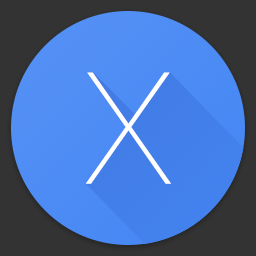
<style>
.page{position:relative;width:256px;height:256px;background:#333333}
.page>*{position:absolute;margin:0}
.t1{font:156px "Roboto-Thin";color:#fefefe}
</style>
<div class="page">
<p class="t1" style="left:86px;top:72px;width:85px;height:112px">X</p>
</div>
